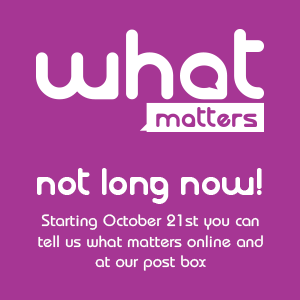
<style>
.page{position:relative;width:300px;height:300px;background:#a63694}
.page>*{position:absolute;margin:0}
.t1{font:36px "Laloted";color:#ffffff}
.t2{font:17px "Opal";color:#ffffff}
</style>
<div class="page">
<p class="t1" style="left:37px;top:168px;width:225px;height:36px">not long now!</p>
<p class="t2" style="left:38px;top:214px;width:225px;height:57px;text-align:center">Starting October 21st you can tell us what matters online and at our post box</p>
</div>
